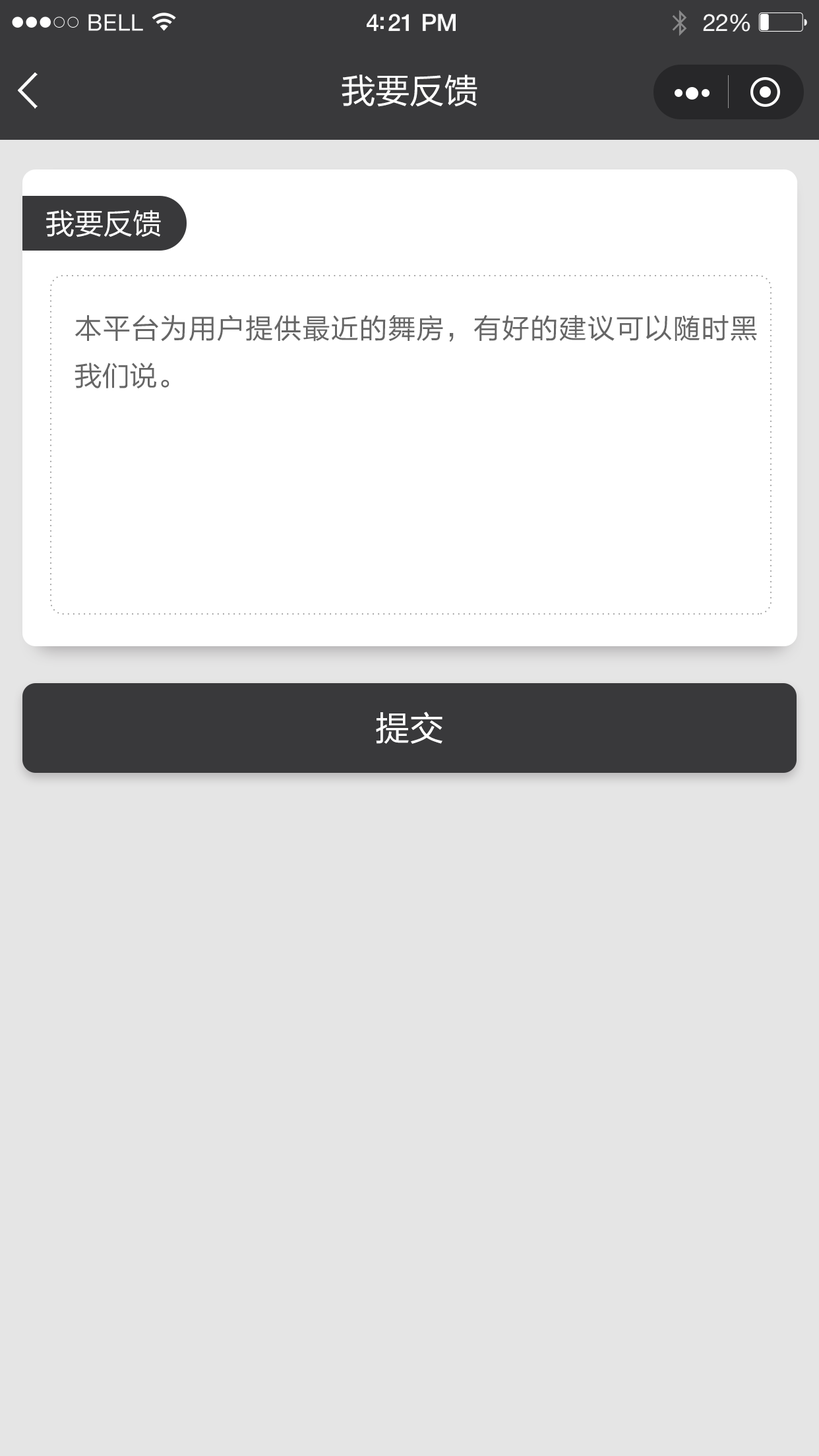
<style>
.page{position:relative;width:819px;height:1456px;background:#e5e5e5}
.page>*{position:absolute;margin:0}
.t1{font:34.3px "FZLTHJW--GB1-0";color:#ffffff}
.t2{font:29px "FZLTHJW--GB1-0";color:#ffffff}
.t3{font:27.7px/47.5px "FZLTHJW--GB1-0";color:#666666}
</style>
<div class="page">
<p class="t1" style="left:342px;top:75px;width:135px;height:32px">我要反馈</p>
<p class="t2" style="left:46px;top:210px;width:115px;height:27px">我要反馈</p>
<p class="t3" style="left:75px;top:315px;width:682px;height:73px;text-align:justify">本平台为用户提供最近的舞房，有好的建议可以随时黑我们说。</p>
<p class="t1" style="left:376px;top:712px;width:66px;height:32px">提交</p>
</div>
